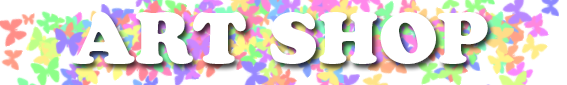
<style>
.page{position:relative;width:567px;height:85px;background:#ffffff}
.page>*{position:absolute;margin:0}
.t1{font:72px "CooperBlackStd";color:#ffffff}
</style>
<div class="page">
<p class="t1" style="left:72px;top:12px;width:416px;height:52px">ART SHOP</p>
</div>
